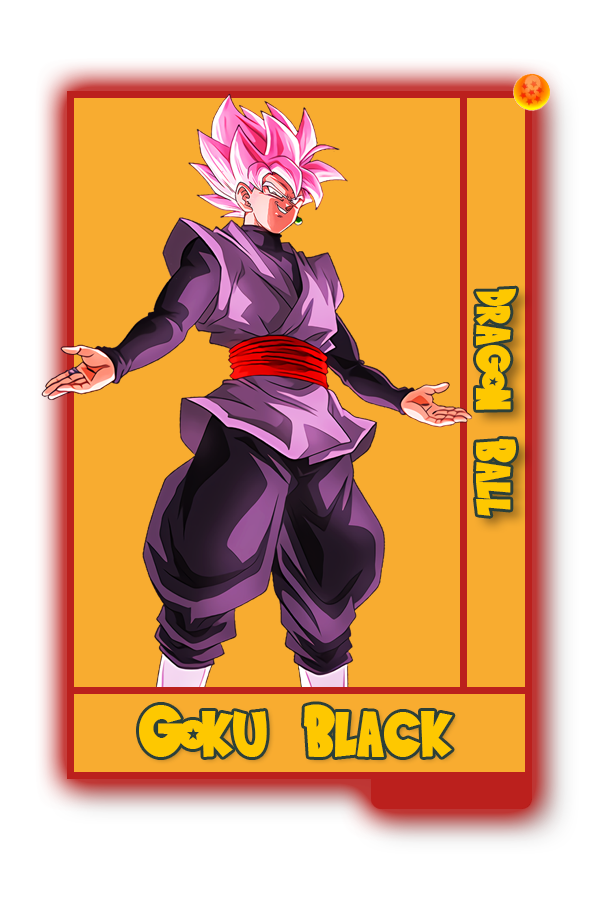
<style>
.page{position:relative;width:600px;height:900px;background:#f8ac30}
.page>*{position:absolute;margin:0}
.t1{font:56.9px "SaiyanSans";color:#fec800}
.t2{font:75px "SaiyanSans";color:#fec800}
</style>
<div class="page">
<p class="t1" style="left:476px;top:288px;width:40px;height:228px;rotate:90deg">Dragon Ball</p>
<p class="t2" style="left:139px;top:704px;width:314px;height:53px">Goku Black</p>
</div>
